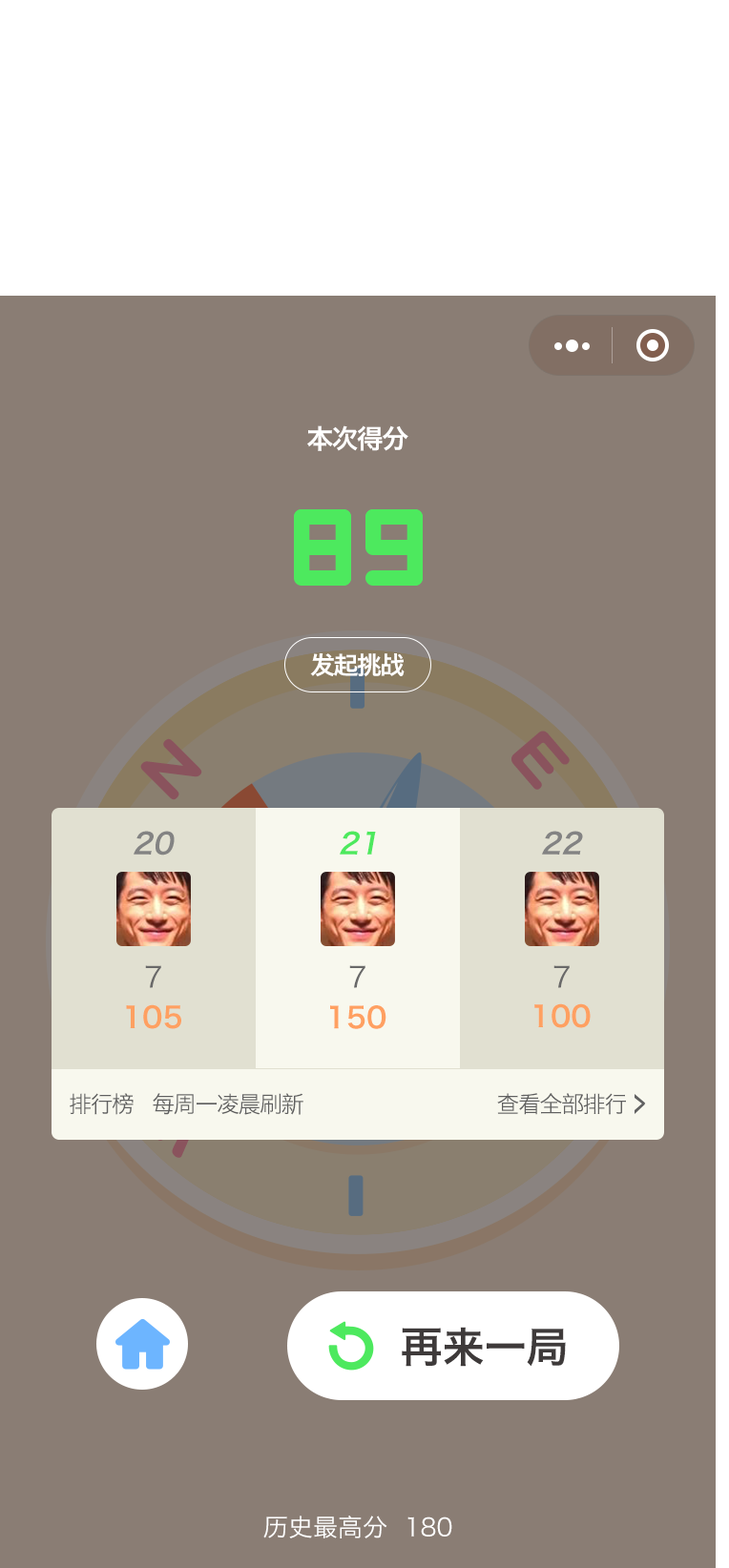
<style>
.page{position:relative;width:729px;height:1568px;background:#8a7d74}
.page>*{position:absolute;margin:0}
.t1{font:26.7px "HiraginoSansGB-W6";letter-spacing:-0.06em;color:#ffffff}
.t2{font:24.8px "HiraginoSansGB-W6";letter-spacing:-0.06em;color:#ffffff}
.t3{font:28.6px "HiraginoSansGB-W6";color:#838383;font-style:italic}
.t4{font:28.6px "HiraginoSansGB-W6";color:#4de95e;font-style:italic}
.t5{font:28.6px "HiraginoSansGB-W3";color:#696969}
.t6{font:28.6px "HiraginoSansGB-W6";color:#ffa061}
.t7{font:22.9px "HiraginoSansGB-W3";letter-spacing:-0.06em;color:#606060}
.t8{font:42px "HiraginoSansGB-W6";color:#3e3a3a}
.t9{font:24.8px "HiraginoSansGB-W3";color:#ffffff}
</style>
<div class="page">
<p class="t1" style="left:307px;top:425px;width:101px;height:26px">本次得分</p>
<p class="t2" style="left:310px;top:653px;width:94px;height:24px">发起挑战</p>
<p class="t3" style="left:134px;top:831px;width:41px;height:25px">20</p>
<p class="t4" style="left:340px;top:831px;width:36px;height:24px">21</p>
<p class="t3" style="left:542px;top:831px;width:41px;height:24px">22</p>
<p class="t5" style="left:145px;top:965px;width:16px;height:23px">7</p>
<p class="t5" style="left:349px;top:965px;width:16px;height:23px">7</p>
<p class="t5" style="left:553px;top:965px;width:16px;height:23px">7</p>
<p class="t6" style="left:126px;top:1004px;width:55px;height:25px">105</p>
<p class="t6" style="left:330px;top:1005px;width:56px;height:24px">150</p>
<p class="t6" style="left:534px;top:1003px;width:56px;height:25px">100</p>
<p class="t7" style="left:70px;top:1093px;width:556px;height:22px">排行榜   每周一凌晨刷新                               查看全部排行</p>
<p class="t8" style="left:402px;top:1327px;width:164px;height:40px">再来一局</p>
<p class="t9" style="left:263px;top:1516px;width:189px;height:22px">历史最高分  180</p>
</div>
